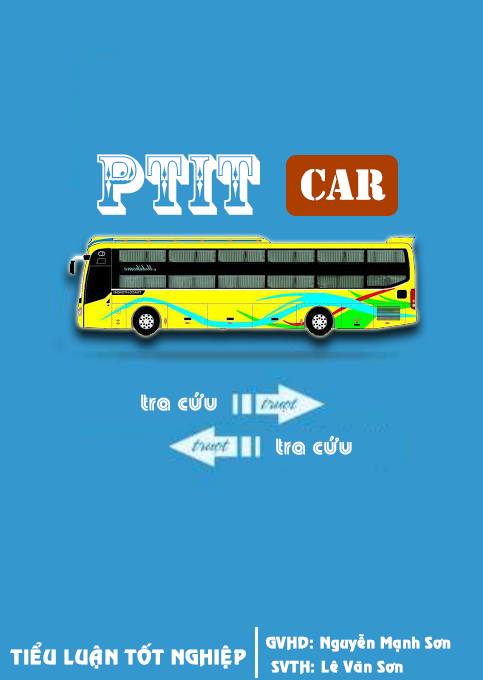
<style>
.page{position:relative;width:483px;height:680px;background:#3497ce}
.page>*{position:absolute;margin:0}
.t1{font:80px "RosewoodStd-Regular";color:#ffffff}
.t2{font:40px "StencilStd";color:#ffffff}
.t3{font:30px "VNI-Tubes";color:#ffffff}
.t4{font:14px "VNI-Revue-Bold";color:#ffffff}
.t5{font:18px "VNI-Revue-Bold";color:#ffffff}
</style>
<div class="page">
<p class="t1" style="left:97px;top:154px;width:163px;height:61px">PTIT</p>
<p class="t2" style="left:301px;top:169px;width:85px;height:32px">car</p>
<p class="t3" style="left:141px;top:391px;width:76px;height:20px">tra cöùu</p>
<p class="t3" style="left:276px;top:435px;width:76px;height:20px">tra cöùu</p>
<p class="t4" style="left:266px;top:634px;width:185px;height:18px">GVHD: Nguyeãn Maïnh Sôn</p>
<p class="t5" style="left:10px;top:642px;width:236px;height:27px">TIEÅU LUAÄN TOÁT NGHIEÄP</p>
<p class="t4" style="left:271px;top:660px;width:132px;height:15px">SVTH: Leâ Vaên Sôn</p>
</div>
